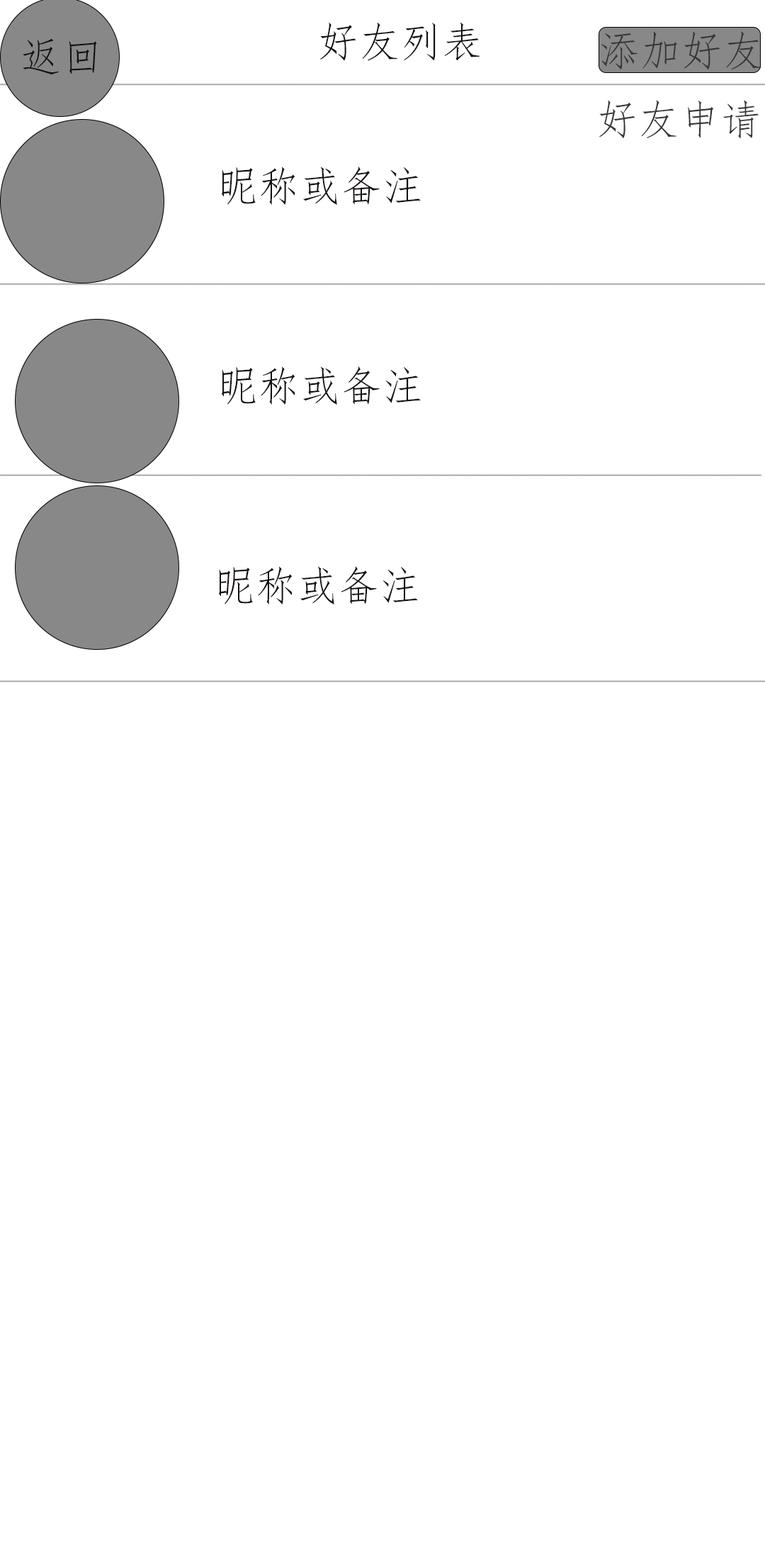
<style>
.page{position:relative;width:765px;height:1559px;background:#ffffff}
.page>*{position:absolute;margin:0}
.t1{font:41.3px "FangSong";color:#151010}
.t2{font:41.3px "FangSong";color:#383636}
</style>
<div class="page">
<p class="t1" style="left:320px;top:22px;width:160px;height:39px">好友列表</p>
<p class="t1" style="left:23px;top:38px;width:74px;height:37px">返回</p>
<p class="t2" style="left:601px;top:31px;width:161px;height:39px">添加好友</p>
<p class="t2" style="left:599px;top:100px;width:160px;height:39px">好友申请</p>
<p class="t1" style="left:222px;top:166px;width:199px;height:39px">昵称或备注</p>
<p class="t1" style="left:222px;top:366px;width:199px;height:39px">昵称或备注</p>
<p class="t1" style="left:219px;top:566px;width:199px;height:38px">昵称或备注</p>
</div>
